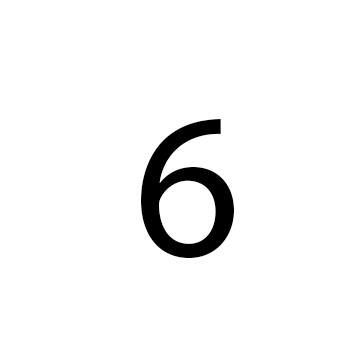
<style>
.page{position:relative;width:354px;height:354px;background:#ffffff}
.page>*{position:absolute;margin:0}
.t1{font:208.3px "MyriadPro-Regular";color:#000000}
</style>
<div class="page">
<p class="t1" style="left:141px;top:119px;width:93px;height:140px">6</p>
</div>
